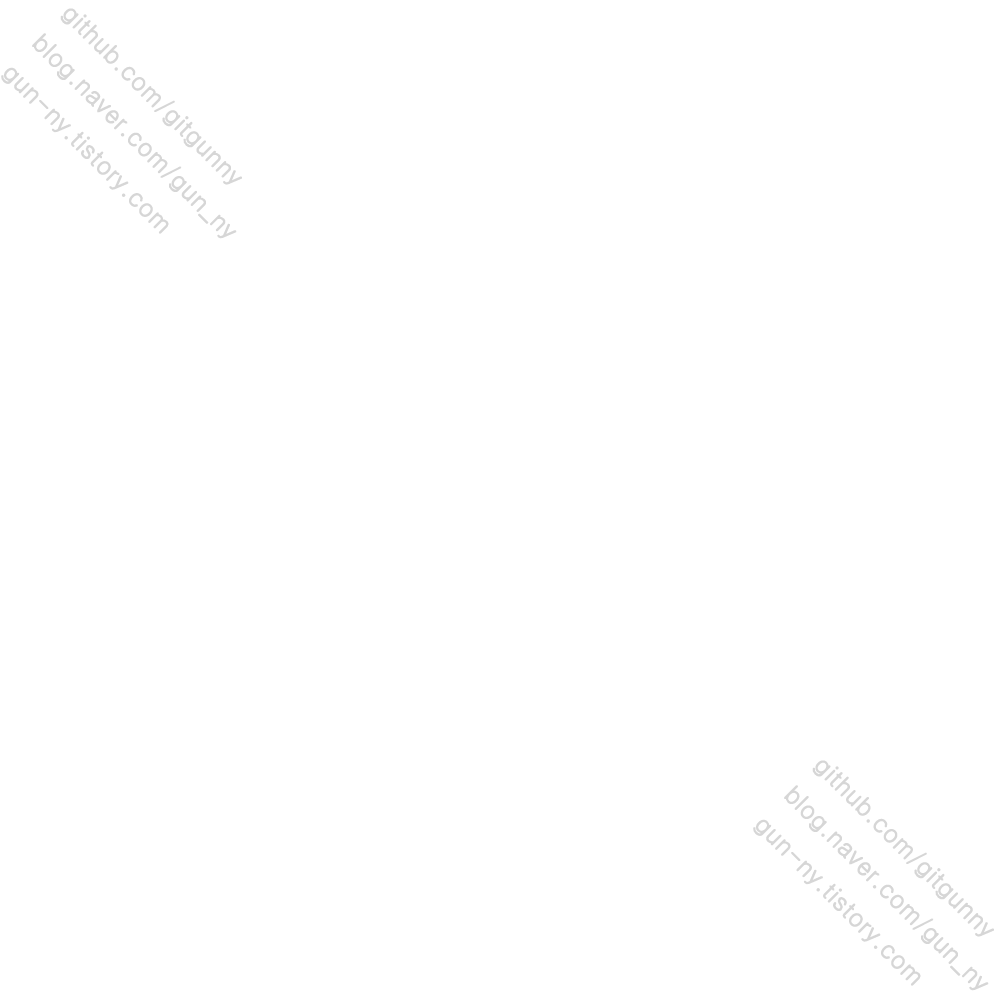
<style>
.page{position:relative;width:1000px;height:1000px;background:#ffffff}
.page>*{position:absolute;margin:0}
.t1{font:24px "Gulim";color:#d6d6d6;font-weight:bold}
</style>
<div class="page">
<p class="t1" style="left:1px;top:8px;width:241px;height:231px;rotate:45deg">github.com/gitgunny<br>blog.naver.com/gun_ny<br>gun-ny.tistory.com</p>
<p class="t1" style="left:753px;top:760px;width:241px;height:231px;rotate:45deg">github.com/gitgunny<br>blog.naver.com/gun_ny<br>gun-ny.tistory.com</p>
</div>
